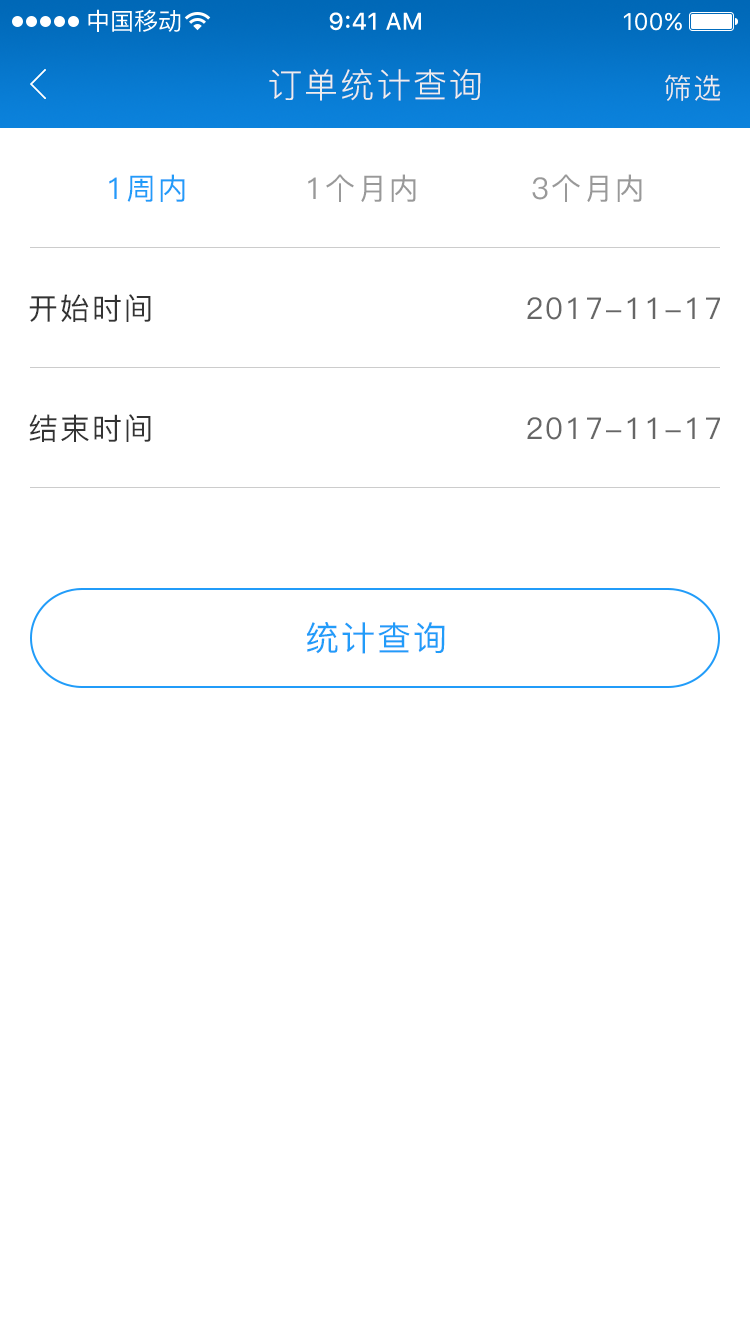
<style>
.page{position:relative;width:750px;height:1334px;background:#ffffff}
.page>*{position:absolute;margin:0}
.t1{font:34px "PingFang-SC-Regular";letter-spacing:0.06em;color:#eeeeee}
.t2{font:28px "PingFang-SC-Regular";letter-spacing:0.06em;color:#eeeeee}
.t3{font:30px "PingFang-SC-Medium";letter-spacing:0.06em;color:#219cf9}
.t4{font:30px "PingFang-SC-Medium";letter-spacing:0.06em;color:#999999}
.t5{font:30px "PingFang-SC-Medium";letter-spacing:0.06em;color:#333333}
.t6{font:30px "PingFang-SC-Medium";letter-spacing:0.06em;color:#666666}
.t7{font:34px "PingFang-SC-Medium";letter-spacing:0.06em;color:#219cf9}
</style>
<div class="page">
<p class="t1" style="left:269px;top:69px;width:212px;height:32px">订单统计查询</p>
<p class="t2" style="left:665px;top:74px;width:56px;height:27px">筛选</p>
<p class="t3" style="left:109px;top:174px;width:76px;height:28px">1周内</p>
<p class="t4" style="left:308px;top:174px;width:108px;height:28px">1个月内</p>
<p class="t4" style="left:532px;top:174px;width:110px;height:28px">3个月内</p>
<p class="t5" style="left:29px;top:294px;width:122px;height:28px">开始时间</p>
<p class="t6" style="left:527px;top:297px;width:193px;height:23px">2017-11-17</p>
<p class="t5" style="left:29px;top:414px;width:122px;height:28px">结束时间</p>
<p class="t6" style="left:527px;top:417px;width:193px;height:23px">2017-11-17</p>
<p class="t7" style="left:306px;top:622px;width:139px;height:32px">统计查询</p>
</div>
